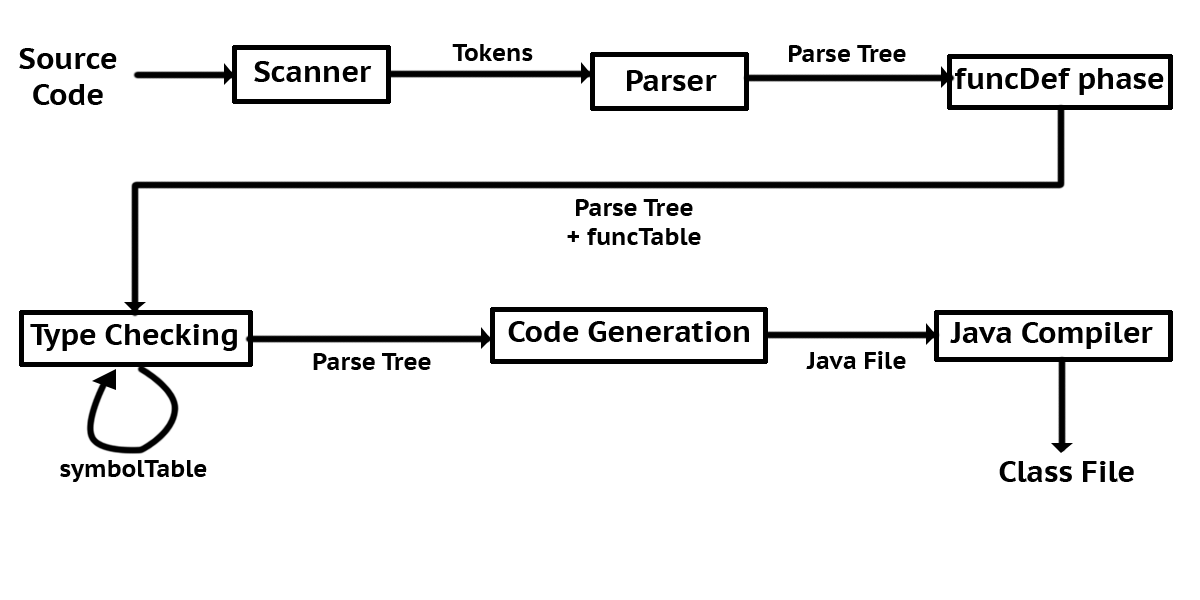
<style>
.page{position:relative;width:1200px;height:600px;background:#ffffff}
.page>*{position:absolute;margin:0}
.t1{font:30px "PTSans-CaptionBold";color:#000000}
.t2{font:24px "PTSans-CaptionBold";color:#000000}
</style>
<div class="page">
<p class="t1" style="left:19px;top:48px;width:98px;height:57px;text-align:center">Source<br>Code</p>
<p class="t2" style="left:452px;top:44px;width:81px;height:17px">Tokens</p>
<p class="t2" style="left:789px;top:45px;width:117px;height:17px">Parse Tree</p>
<p class="t1" style="left:254px;top:61px;width:118px;height:21px">Scanner</p>
<p class="t1" style="left:627px;top:70px;width:90px;height:21px">Parser</p>
<p class="t1" style="left:955px;top:68px;width:209px;height:27px">funcDef phase</p>
<p class="t2" style="left:567px;top:199px;width:134px;height:46px;text-align:center">Parse Tree<br>+ funcTable</p>
<p class="t1" style="left:30px;top:324px;width:207px;height:27px">Type Checking</p>
<p class="t1" style="left:508px;top:321px;width:241px;height:21px">Code Generation</p>
<p class="t1" style="left:950px;top:322px;width:203px;height:27px">Java Compiler</p>
<p class="t2" style="left:313px;top:353px;width:118px;height:17px">Parse Tree</p>
<p class="t2" style="left:806px;top:351px;width:100px;height:18px">Java File</p>
<p class="t2" style="left:60px;top:460px;width:147px;height:22px">symbolTable</p>
<p class="t1" style="left:999px;top:461px;width:135px;height:21px">Class File</p>
</div>
